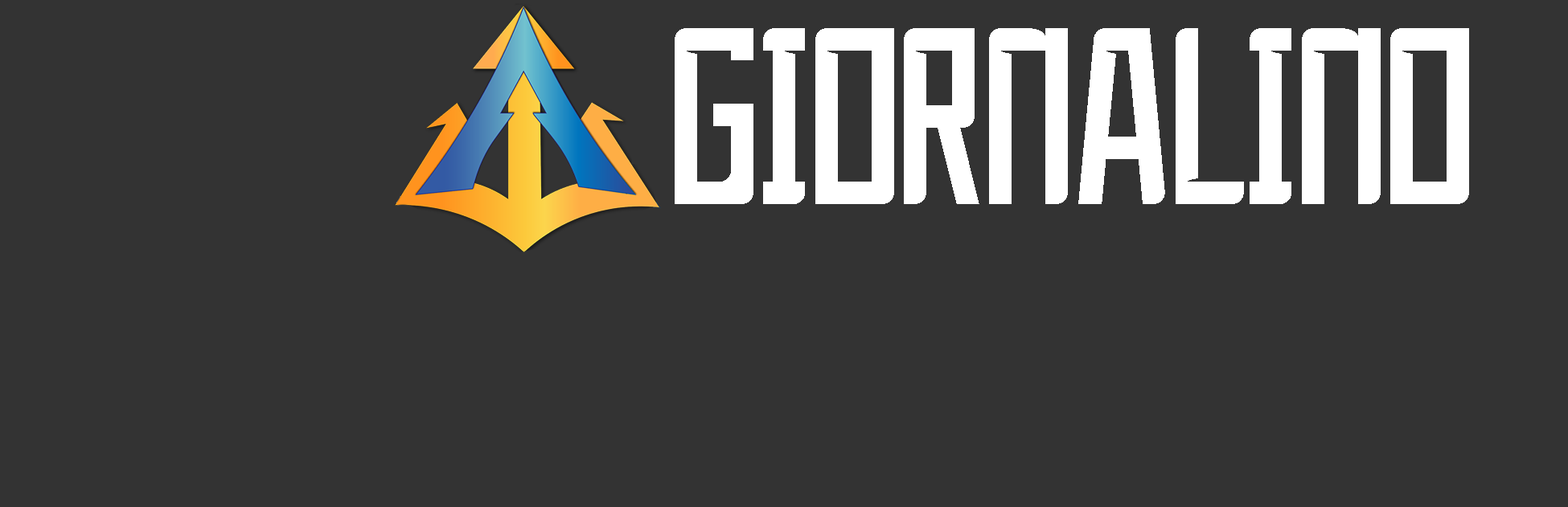
<style>
.page{position:relative;width:1568px;height:507px;background:#333333}
.page>*{position:absolute;margin:0}
.t1{font:201px "JerrySport-Demo";color:#ffffff}
</style>
<div class="page">
<p class="t1" style="left:675px;top:28px;width:794px;height:176px">GIORNALINO</p>
</div>
